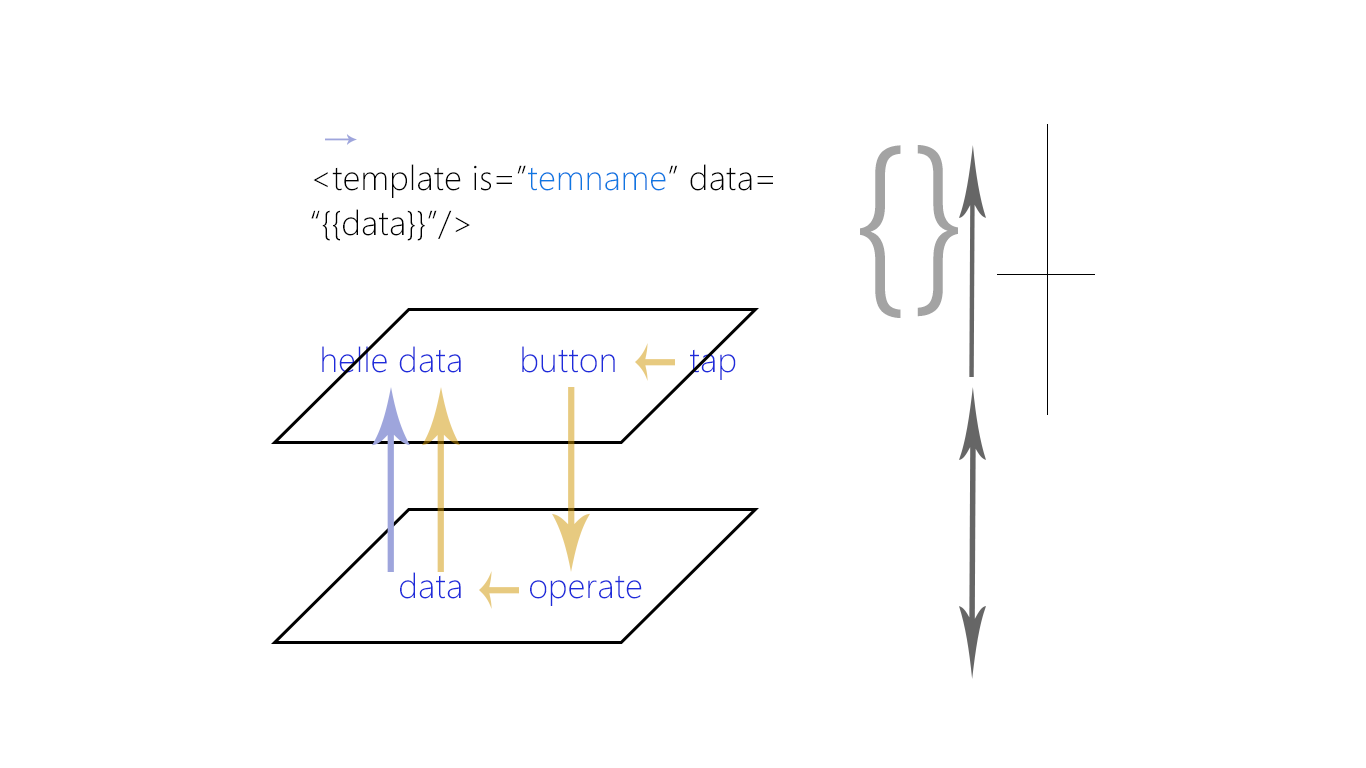
<style>
.page{position:relative;width:1366px;height:768px;background:#ffffff}
.page>*{position:absolute;margin:0}
.t1{font:185.7px "MicrosoftYaHeiLight";letter-spacing:0.01em;color:#a3a3a3}
.t2{font:184.1px "MicrosoftYaHeiLight";letter-spacing:0.01em;color:#a3a3a3}
.t3{font:32px/45px "MicrosoftYaHeiLight";letter-spacing:0.01em;color:#000000}
.t4{font:32px/45px "MicrosoftYaHeiLight";letter-spacing:0.01em;color:#0f77e2}
.t5{font:32px "MicrosoftYaHeiLight";letter-spacing:0.01em;color:#1e2bdb}
</style>
<div class="page">
<p class="t1" style="left:860px;top:145px;width:41px;height:173px">{</p>
<p class="t2" style="left:917px;top:145px;width:41px;height:172px;rotate:180deg">{</p>
<p class="t3" style="left:311px;top:164px;width:462px;height:77px">&lt;template is=”<span class="t4">temname</span>” data=<br>“{{data}}”/&gt;</p>
<p class="t5" style="left:322px;top:346px;width:139px;height:27px">helle data</p>
<p class="t5" style="left:522px;top:346px;width:93px;height:27px">button</p>
<p class="t5" style="left:690px;top:349px;width:46px;height:31px">tap</p>
<p class="t5" style="left:400px;top:572px;width:61px;height:27px">data</p>
<p class="t5" style="left:530px;top:575px;width:112px;height:31px">operate</p>
</div>
